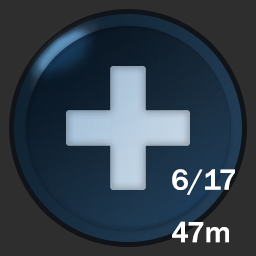
<style>
.page{position:relative;width:256px;height:256px;background:#2e2e2e}
.page>*{position:absolute;margin:0}
.t1{font:30px "FranklinGothic-Medium";color:#ffffff}
</style>
<div class="page">
<p class="t1" style="left:172px;top:169px;width:63px;height:74px">6/17<br>47m</p>
</div>
